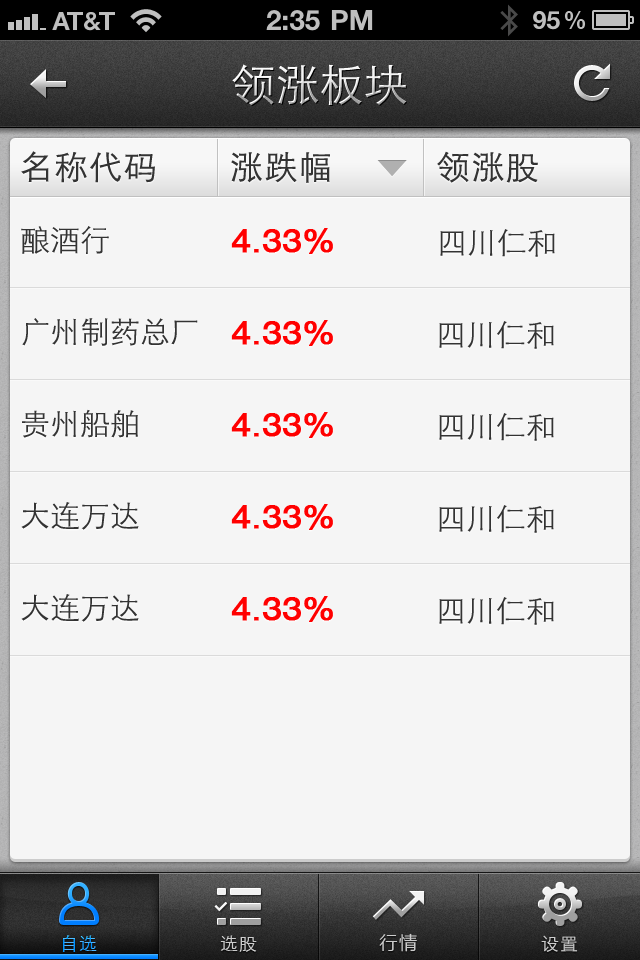
<style>
.page{position:relative;width:640px;height:960px;background:#f5f5f5}
.page>*{position:absolute;margin:0}
.t1{font:44px "STXihei";letter-spacing:0.005em}
.t2{font:33px "STXihei";letter-spacing:0.05em;color:#333333}
.t3{font:30px "STXihei";color:#333333}
.t4{font:33.2px "HelveticaCE-Regular";color:#ff0000;font-weight:bold;scale:1.05 1}
.t5{font:18px "STXihei";letter-spacing:0.05em}
.t6{font:18px "STXihei";letter-spacing:0.05em;color:#cccccc}
.t7{font:18px "MicrosoftYaHei";letter-spacing:0.1em;color:#cccccc}
</style>
<div class="page">
<p class="t1" style="left:232px;top:64px;width:174px;height:42px">领涨板块</p>
<p class="t2" style="left:21px;top:151px;width:134px;height:32px">名称代码</p>
<p class="t2" style="left:231px;top:152px;width:99px;height:31px">涨跌幅</p>
<p class="t2" style="left:437px;top:151px;width:101px;height:32px">领涨股</p>
<p class="t3" style="left:21px;top:226px;width:88px;height:28px">酿酒行</p>
<p class="t4" style="left:231px;top:228px;width:102px;height:26px">4.33%</p>
<p class="t3" style="left:440px;top:229px;width:115px;height:28px">四川仁和</p>
<p class="t3" style="left:22px;top:318px;width:176px;height:28px">广州制药总厂</p>
<p class="t4" style="left:231px;top:320px;width:102px;height:26px">4.33%</p>
<p class="t3" style="left:439px;top:321px;width:115px;height:28px">四川仁和</p>
<p class="t3" style="left:22px;top:409px;width:116px;height:29px">贵州船舶</p>
<p class="t4" style="left:231px;top:412px;width:102px;height:26px">4.33%</p>
<p class="t3" style="left:439px;top:413px;width:115px;height:28px">四川仁和</p>
<p class="t3" style="left:21px;top:502px;width:118px;height:28px">大连万达</p>
<p class="t4" style="left:231px;top:504px;width:102px;height:26px">4.33%</p>
<p class="t3" style="left:439px;top:505px;width:115px;height:28px">四川仁和</p>
<p class="t3" style="left:21px;top:594px;width:118px;height:28px">大连万达</p>
<p class="t4" style="left:231px;top:596px;width:102px;height:26px">4.33%</p>
<p class="t3" style="left:439px;top:597px;width:115px;height:28px">四川仁和</p>
<p class="t5" style="left:62px;top:935px;width:35px;height:17px">自选</p>
<p class="t6" style="left:220px;top:935px;width:37px;height:17px">选股</p>
<p class="t7" style="left:379px;top:933px;width:38px;height:19px">行情</p>
<p class="t6" style="left:541px;top:935px;width:37px;height:17px">设置</p>
</div>
